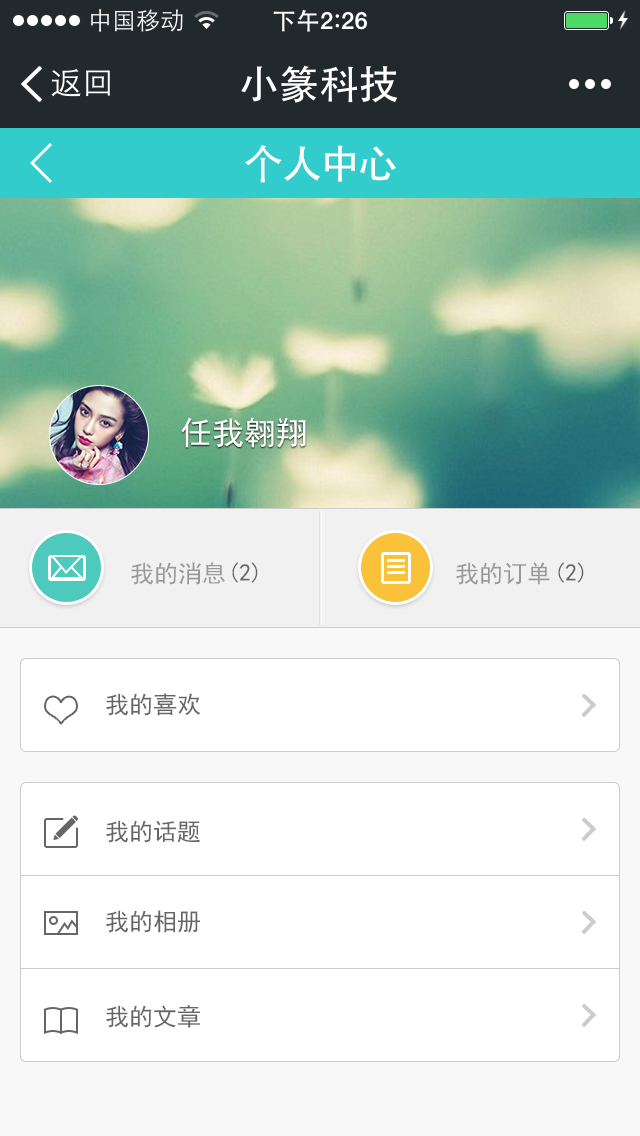
<style>
.page{position:relative;width:640px;height:1136px;background:#ffffff}
.page>*{position:absolute;margin:0}
.t1{font:40px "AdobeHeitiStd-Regular";color:#ffffff}
.t2{font:32px "SimHei";color:#ffffff}
.t3{font:24px "SimHei";color:#999999}
.t4{font:24px "SimHei";color:#666666}
</style>
<div class="page">
<p class="t1" style="left:245px;top:145px;width:151px;height:38px">个人中心</p>
<p class="t2" style="left:181px;top:417px;width:125px;height:31px">任我翱翔</p>
<p class="t3" style="left:131px;top:562px;width:94px;height:23px">我的消息</p>
<p class="t4" style="left:232px;top:562px;width:26px;height:21px">(2)</p>
<p class="t3" style="left:456px;top:562px;width:94px;height:23px">我的订单</p>
<p class="t4" style="left:558px;top:562px;width:26px;height:21px">(2)</p>
<p class="t4" style="left:106px;top:693px;width:94px;height:23px">我的喜欢</p>
<p class="t4" style="left:106px;top:820px;width:94px;height:23px">我的话题</p>
<p class="t4" style="left:106px;top:910px;width:94px;height:23px">我的相册</p>
<p class="t4" style="left:106px;top:1005px;width:94px;height:23px">我的文章</p>
</div>
